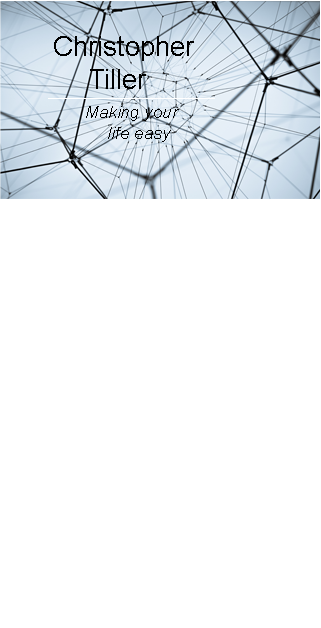
<style>
.page{position:relative;width:321px;height:628px;background:#ffffff}
.page>*{position:absolute;margin:0}
.t1{font:27.2px "ArialMT";color:#000000}
.t2{font:16.9px "Arial-ItalicMT";color:#000000}
</style>
<div class="page">
<p class="t1" style="left:54px;top:36px;width:140px;height:53px">Christopher<br> Tiller</p>
<p class="t2" style="left:86px;top:106px;width:93px;height:36px">Making your<br> life easy</p>
</div>
